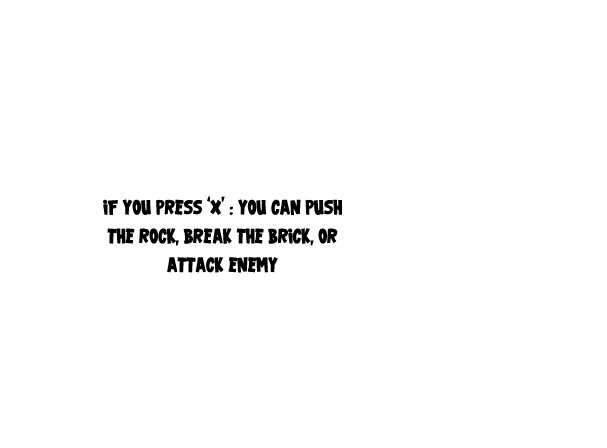
<style>
.page{position:relative;width:607px;height:448px;background:#ffffff}
.page>*{position:absolute;margin:0}
.t1{font:24px "000VTC-GarageSaleTB";color:#000000}
</style>
<div class="page">
<p class="t1" style="left:103px;top:196px;width:239px;height:77px;text-align:center">iF you press ‘x’ : you can push the rock, break the brick, or attack enemy</p>
</div>
